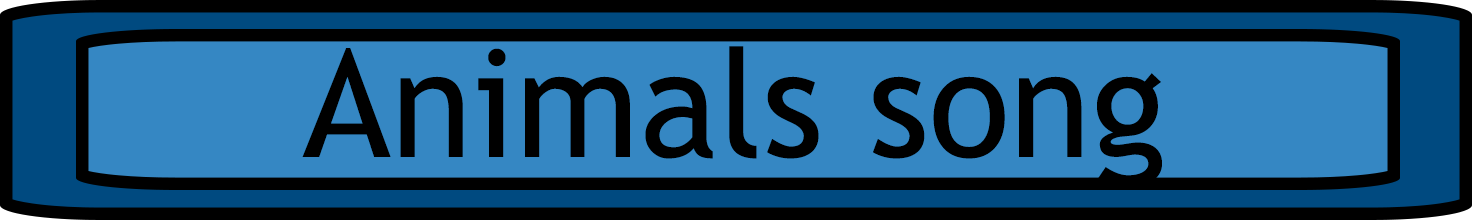
<style>
.page{position:relative;width:1472px;height:220px;background:#3587c3}
.page>*{position:absolute;margin:0}
.t1{font:150px "TrebuchetMS";color:#000000}
</style>
<div class="page">
<p class="t1" style="left:302px;top:46px;width:860px;height:142px">Animals song</p>
</div>
